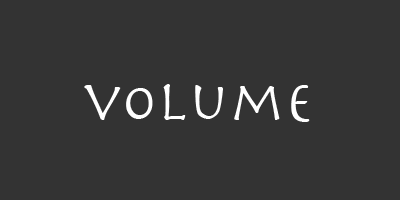
<style>
.page{position:relative;width:400px;height:200px;background:#333333}
.page>*{position:absolute;margin:0}
.t1{font:58.3px "Herculanum";color:#ffffff}
</style>
<div class="page">
<p class="t1" style="left:84px;top:84px;width:226px;height:38px">volume</p>
</div>
